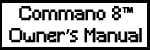
<style>
.page{position:relative;width:150px;height:50px;background:#ffffff}
.page>*{position:absolute;margin:0}
.t1{font:18.6px "Minecraft";color:#000000;font-weight:bold;scale:0.9 1}
.t2{font:18.6px "MyriadPro-Regular";color:#000000;font-weight:bold;scale:0.9 1}
</style>
<div class="page">
<p class="t1" style="left:9px;top:6px;width:133px;height:37px;text-align:center">Commano 8<span class="t2">™</span><br>Owner<span class="t2">’</span>s Manual</p>
</div>
